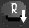
<style>
.page{position:relative;width:29px;height:28px;background:#333333}
.page>*{position:absolute;margin:0}
.t1{font:12.9px "Splatoon2";color:#f0f0f0}
</style>
<div class="page">
<p class="t1" style="left:11px;top:2px;width:7px;height:12px">R</p>
</div>
